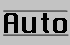
<style>
.page{position:relative;width:70px;height:45px;background:#c3c3c3}
.page>*{position:absolute;margin:0}
.t1{font:26.7px "Silom";color:#000000}
</style>
<div class="page">
<p class="t1" style="left:4px;top:13px;width:63px;height:20px">Auto</p>
</div>
